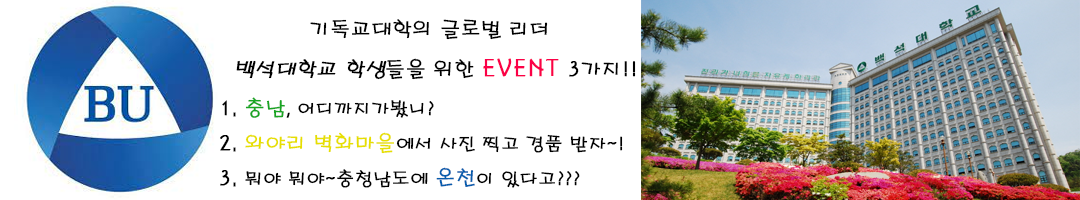
<style>
.page{position:relative;width:1080px;height:200px;background:#ffffff}
.page>*{position:absolute;margin:0}
.t1{font:20px "H2porL";color:#000000;font-weight:bold}
.t2{font:20px "H2porL";color:#000000;font-weight:bold;font-style:italic}
.t3{font:24px "H2porL";color:#fb0047;font-weight:bold}
.t4{font:18px "H2porL";color:#000000;font-weight:bold}
.t5{font:20px "H2porL";color:#18a522;font-weight:bold}
.t6{font:20px "H2porL";color:#e7df00;font-weight:bold}
.t7{font:20px "H2porL";color:#065dad;font-weight:bold}
</style>
<div class="page">
<p class="t1" style="left:310px;top:19px;width:238px;height:21px">기독교대학의 글로벌 리더</p>
<p class="t2" style="left:236px;top:58px;width:400px;height:22px">백석대학교 학생<span class="t1">들을 위한 </span><span class="t3">EVENT</span><span class="t1"> 3가지!!</span></p>
<p class="t4" style="left:220px;top:97px;width:403px;height:91px"><span class="t1">1. </span><span class="t5">충남</span>, 어디까지가봤니?<br><span class="t1">2. </span><span class="t6">와야리 벽화마을</span>에서 사진 찍고 경품 받자~!<br><span class="t1">3. </span>뭐야 뭐야~충청남도에 <span class="t7">온천</span>이 있다고???</p>
</div>
